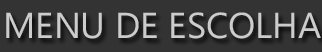
<style>
.page{position:relative;width:322px;height:52px;background:#333333}
.page>*{position:absolute;margin:0}
.t1{font:36px "MicrosoftPhagsPa";color:#cccccc}
</style>
<div class="page">
<p class="t1" style="left:6px;top:12px;width:315px;height:27px">MENU DE ESCOLHA</p>
</div>
